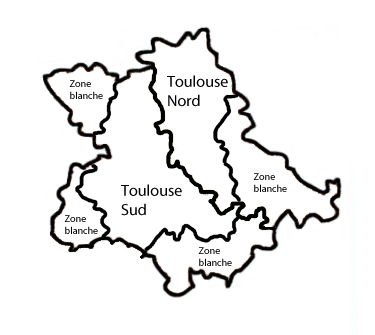
<style>
.page{position:relative;width:375px;height:335px;background:#ffffff}
.page>*{position:absolute;margin:0}
.t1{font:16px "MyriadPro-Regular";color:#000000}
.t2{font:10px "MyriadPro-Regular";color:#000000}
</style>
<div class="page">
<p class="t1" style="left:167px;top:75px;width:61px;height:32px">Toulouse<br>Nord</p>
<p class="t2" style="left:69px;top:80px;width:34px;height:19px">Zone<br>blanche</p>
<p class="t2" style="left:253px;top:173px;width:34px;height:19px">Zone<br>blanche</p>
<p class="t1" style="left:121px;top:184px;width:61px;height:32px">Toulouse<br>Sud</p>
<p class="t2" style="left:64px;top:215px;width:34px;height:19px">Zone<br>blanche</p>
<p class="t2" style="left:198px;top:247px;width:34px;height:19px">Zone<br>blanche</p>
</div>
